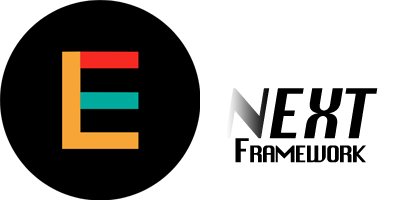
<style>
.page{position:relative;width:400px;height:202px;background:#ffffff}
.page>*{position:absolute;margin:0}
.t1{font:66.7px "Krungthep";letter-spacing:-0.03em;color:#010000;font-style:italic;scale:0.93 1}
.t2{font:32px "Krungthep";letter-spacing:-0.095em;color:#000000;font-variant:small-caps}
</style>
<div class="page">
<p class="t1" style="left:225px;top:88px;width:153px;height:51px">NEXT</p>
<p class="t2" style="left:235px;top:138px;width:131px;height:25px">Framework</p>
</div>
